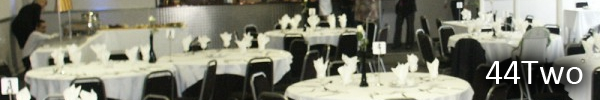
<style>
.page{position:relative;width:600px;height:100px}
.page>*{position:absolute;margin:0}
.t1{font:36px "Calibri";color:#ffffff}
</style>
<div class="page">
<p class="t1" style="left:485px;top:61px;width:98px;height:23px">44Two</p>
</div>
